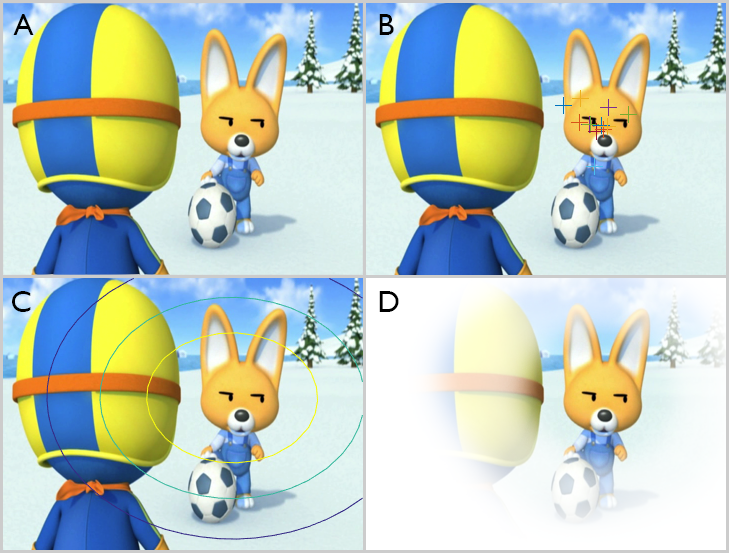
<style>
.page{position:relative;width:729px;height:553px}
.page>*{position:absolute;margin:0}
.t1{font:30px "GillSans";color:#000000}
</style>
<div class="page">
<p class="t1" style="left:13px;top:14px;width:21px;height:21px">A</p>
<p class="t1" style="left:379px;top:14px;width:15px;height:21px">B</p>
<p class="t1" style="left:12px;top:291px;width:19px;height:21px">C</p>
<p class="t1" style="left:379px;top:291px;width:20px;height:21px">D</p>
</div>
